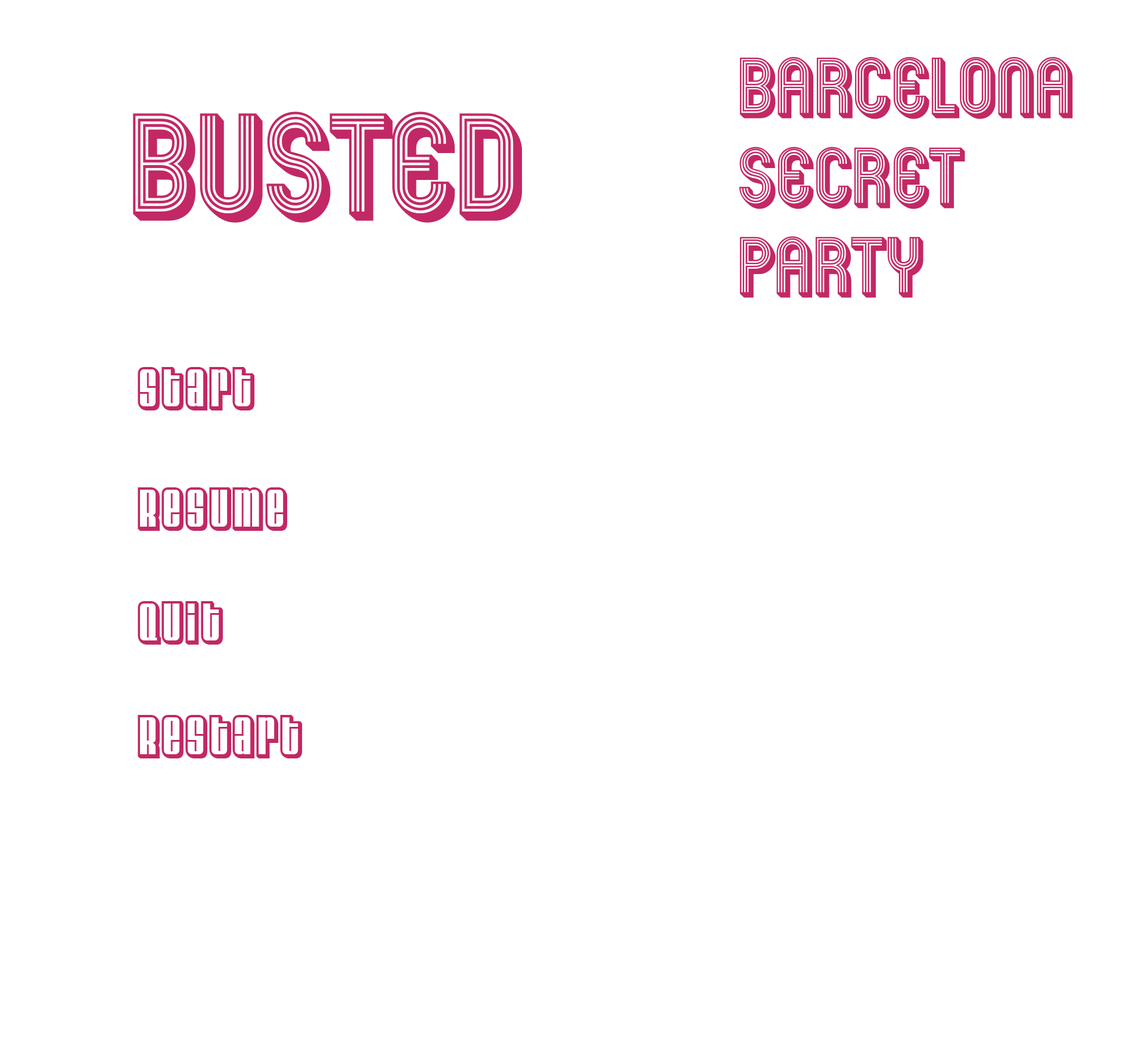
<style>
.page{position:relative;width:1144px;height:1042px;background:#ffffff}
.page>*{position:absolute;margin:0}
.t1{font:74.6px "Mexcellent3D-Regular";color:#c22865;scale:0.95 1}
.t2{font:130.9px "Mexcellent3D-Regular";color:#c22865;scale:0.95 1}
.t3{font:55.5px "VelvendaChill-Regular";color:#c22865;scale:0.95 1}
</style>
<div class="page">
<p class="t1" style="left:739px;top:57px;width:334px;height:241px">Barcelona  <br>Secret <br>Party</p>
<p class="t2" style="left:133px;top:111px;width:390px;height:112px">busted</p>
<p class="t3" style="left:138px;top:367px;width:116px;height:44px">Start</p>
<p class="t3" style="left:138px;top:487px;width:149px;height:44px">Resume</p>
<p class="t3" style="left:138px;top:601px;width:85px;height:44px">Quit</p>
<p class="t3" style="left:138px;top:715px;width:164px;height:44px">Restart</p>
</div>
